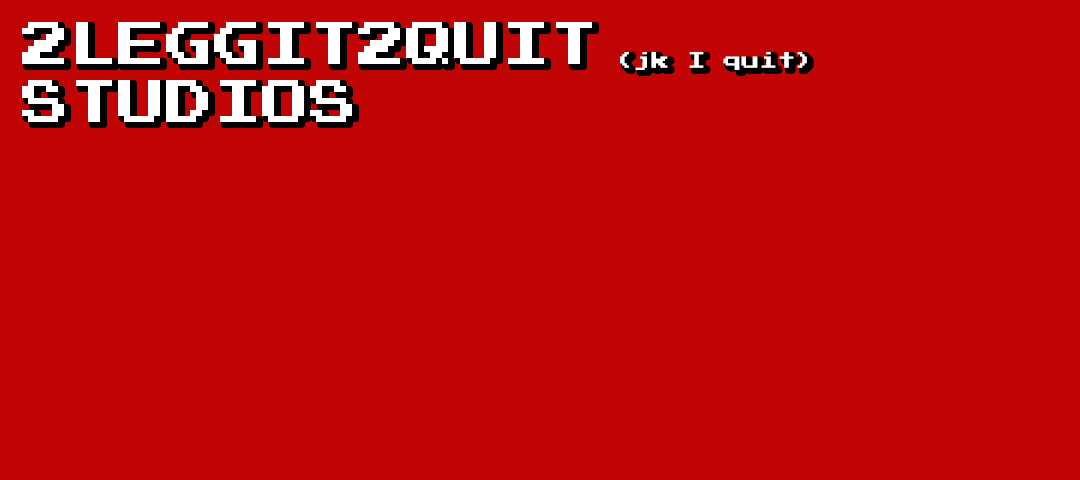
<style>
.page{position:relative;width:1080px;height:480px;background:#c10404}
.page>*{position:absolute;margin:0}
.t1{font:48px "PressStart2P";color:#ffffff}
.t2{font:18px "PressStart2P";color:#ffffff}
</style>
<div class="page">
<p class="t1" style="left:22px;top:22px;width:785px;height:100px">2LEGGIT2QUIT <span class="t2">(jk I quit)<br></span>STUDIOS</p>
</div>
